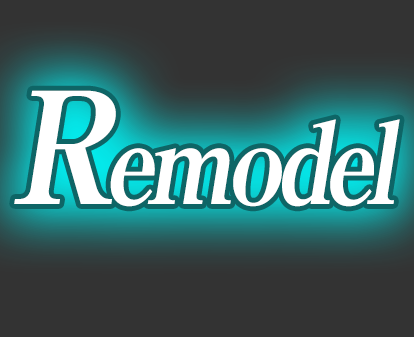
<style>
.page{position:relative;width:414px;height:337px;background:#333333}
.page>*{position:absolute;margin:0}
.t1{font:113px "RyuminPro-ExBold";letter-spacing:-0.09em;color:#ffffff;font-style:italic;scale:0.9 1}
.t2{font:155px "RyuminPro-ExBold";letter-spacing:-0.09em;color:#ffffff;font-style:italic;scale:0.9 1}
</style>
<div class="page">
<p class="t1" style="left:14px;top:90px;width:386px;height:117px"><span class="t2">R</span>emodel</p>
</div>
